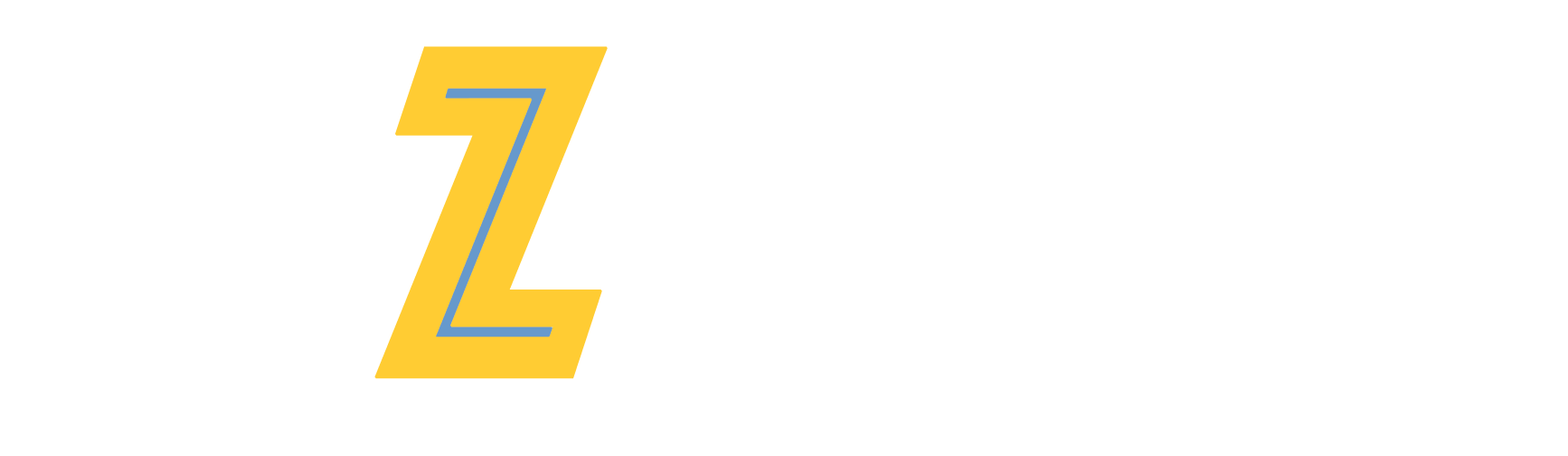
<style>
.page{position:relative;width:1568px;height:456px;background:#ffffff}
.page>*{position:absolute;margin:0}
.t1{font:493.6px "Phosphate-Inline";letter-spacing:0.028em;color:#ffcc33;font-weight:bold;scale:0.86 1}
</style>
<div class="page">
<p class="t1" style="left:374px;top:46px;width:234px;height:333px">Z</p>
</div>
